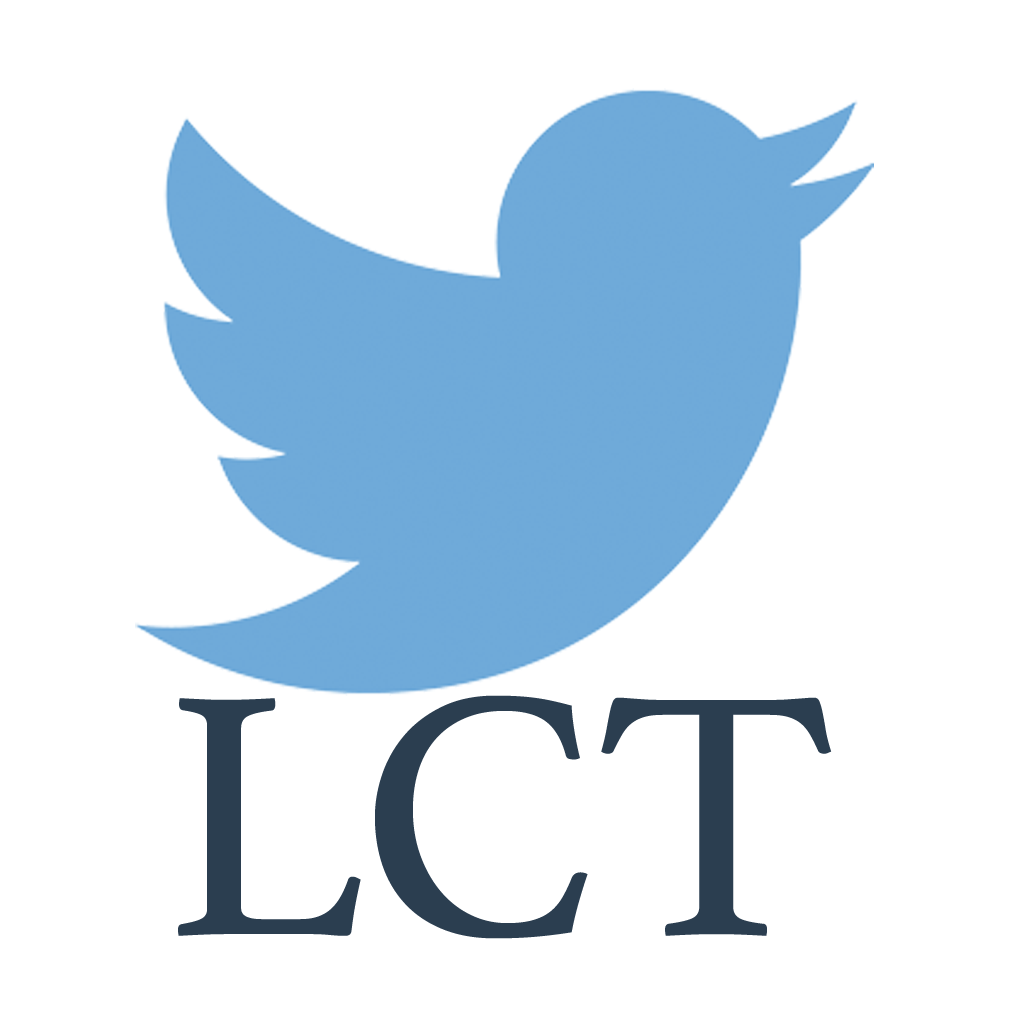
<style>
.page{position:relative;width:1024px;height:1024px;background:#ffffff}
.page>*{position:absolute;margin:0}
.t1{font:360px "Athelas-Regular";color:#2b3e50}
</style>
<div class="page">
<p class="t1" style="left:178px;top:695px;width:654px;height:244px">LCT</p>
</div>
